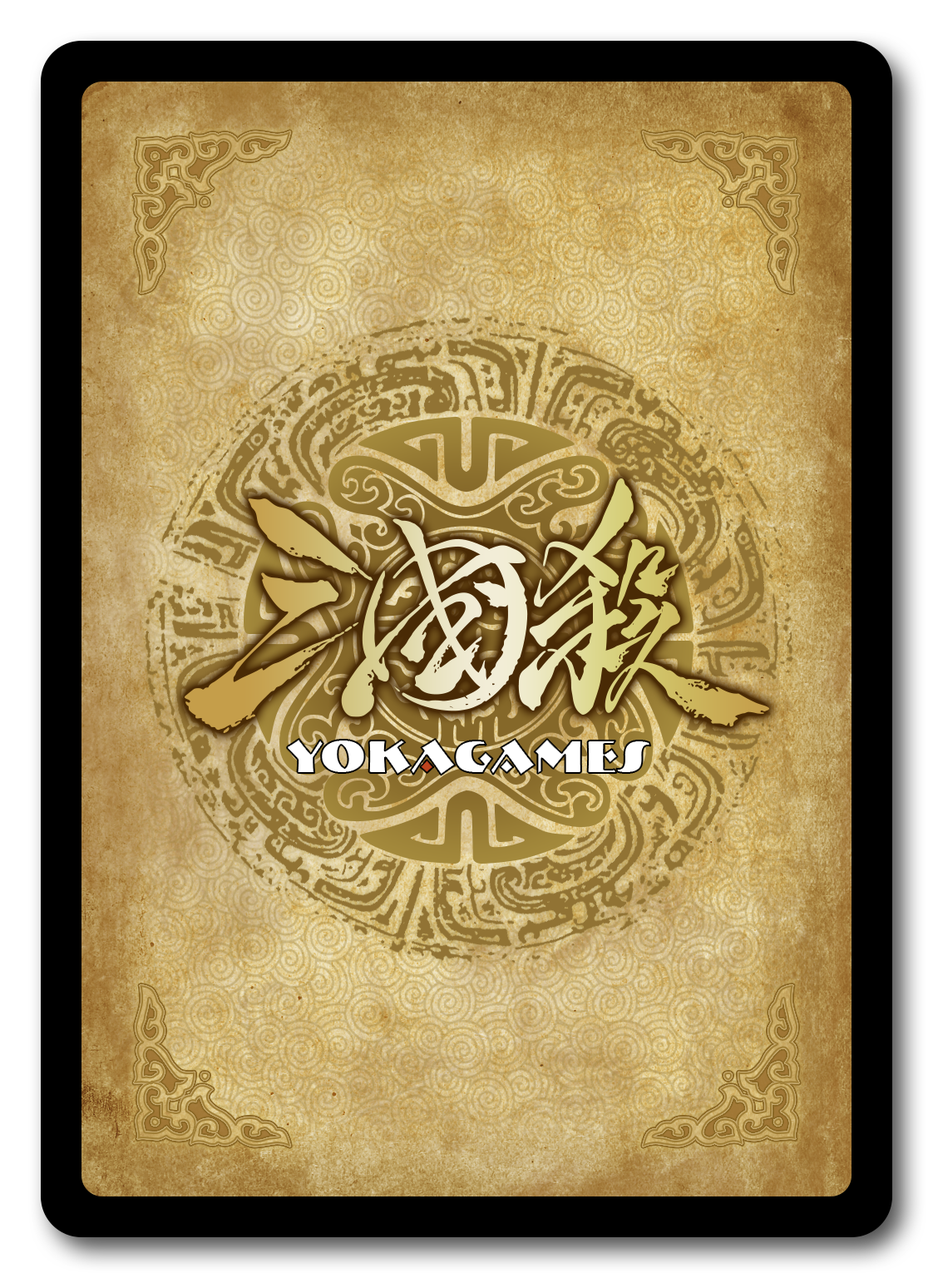
<style>
.page{position:relative;width:933px;height:1278px}
.page>*{position:absolute;margin:0}
.t1{font:47.5px "BremenBT-Black";letter-spacing:0.002em;color:#ffffff}
</style>
<div class="page">
<p class="t1" style="left:287px;top:739px;width:364px;height:36px">YOKAGAMES</p>
<p class="t1" style="left:287px;top:739px;width:364px;height:36px">YOKAGAMES</p>
</div>
